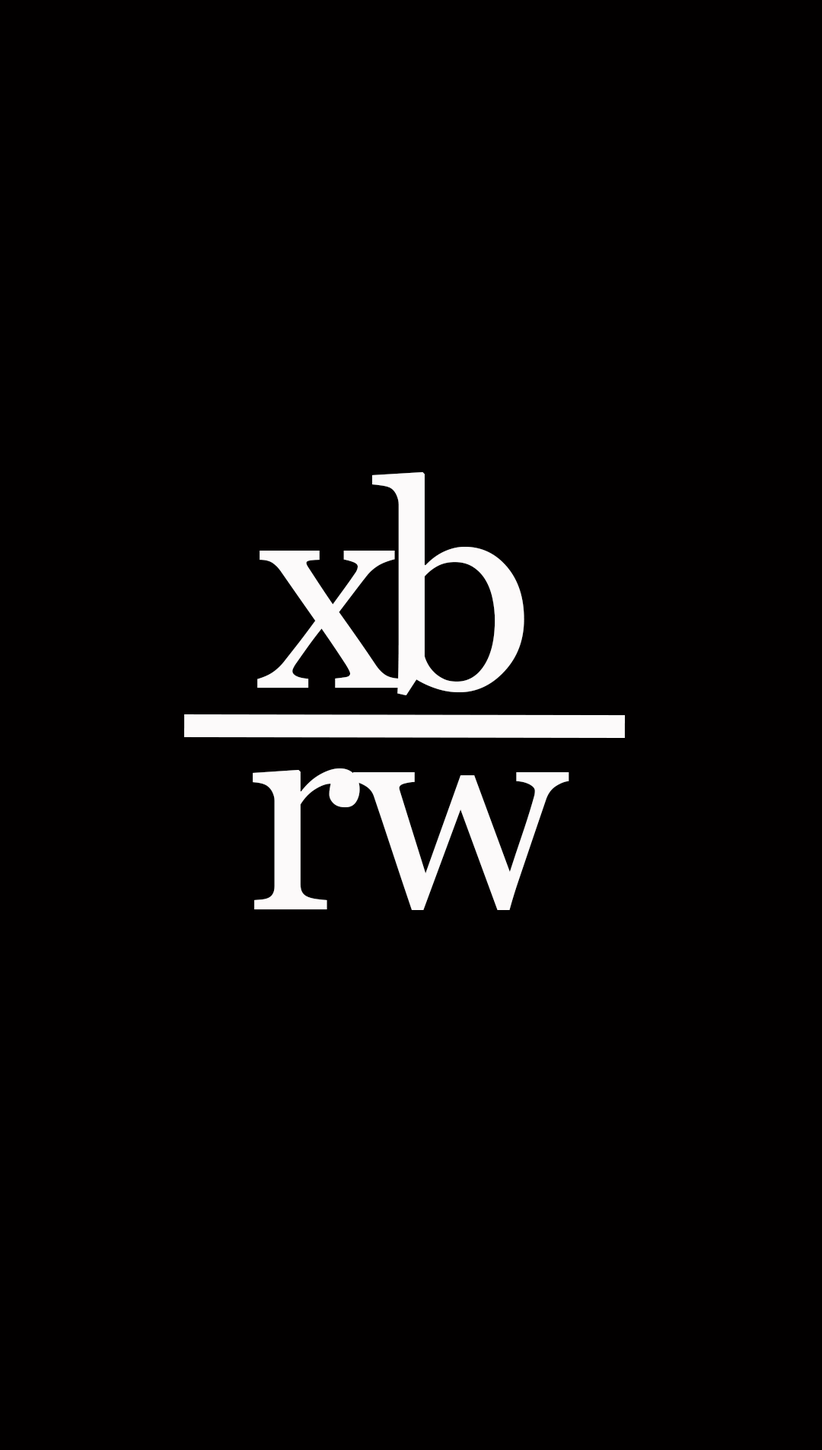
<style>
.page{position:relative;width:822px;height:1450px;background:#020000}
.page>*{position:absolute;margin:0}
.t1{font:285.6px/222.1px "Georgia";letter-spacing:-0.09em;color:#fcfafa}
.t2{font:285.6px/222.1px "Georgia";letter-spacing:-0.025em;color:#fcfafa}
</style>
<div class="page">
<p class="t1" style="left:253px;top:472px;width:317px;height:438px;text-align:center">xb<br><span class="t2">rw</span></p>
</div>
